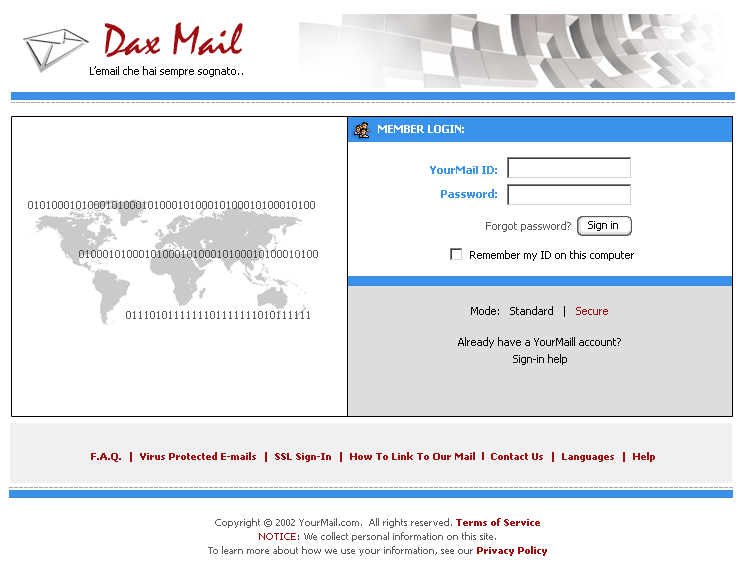
<style>
.page{position:relative;width:752px;height:578px;background:#ffffff}
.page>*{position:absolute;margin:0}
.t1{font:46px "Mistral";color:#9e0c0f}
.t2{font:11px "Tahoma";color:#000000}
.t3{font:11px "Tahoma-Bold";color:#ffffff;text-transform:uppercase}
.t4{font:11px/24px "Tahoma-Bold";color:#3992eb}
.t5{font:11px "Tahoma";color:#595959}
.t6{font:11px "Tahoma";color:#9e0c0f}
.t7{font:10px "Tahoma-Bold";color:#9e0c0f}
.t8{font:10px/14px "Tahoma";color:#595959}
.t9{font:10px/14px "Tahoma-Bold";color:#9e0c0f}
.t10{font:10px/14px "Tahoma";color:#9e0c0f}
</style>
<div class="page">
<p class="t1" style="left:104px;top:22px;width:139px;height:35px">Dax Mail</p>
<p class="t2" style="left:90px;top:66px;width:153px;height:11px">L’email che hai sempre sognato..</p>
<p class="t3" style="left:378px;top:125px;width:86px;height:8px">Member LOgin:</p>
<p class="t4" style="left:430px;top:166px;width:67px;height:32px;text-align:right">YourMail ID:<br>Password:</p>
<p class="t5" style="left:28px;top:201px;width:287px;height:8px">010100010100010100010100010100010100010100010100</p>
<p class="t5" style="left:486px;top:221px;width:85px;height:11px">Forgot password?</p>
<p class="t2" style="left:588px;top:221px;width:30px;height:10px">Sign in</p>
<p class="t5" style="left:79px;top:250px;width:239px;height:8px">0100010100010100010100010100010100010100</p>
<p class="t2" style="left:470px;top:250px;width:164px;height:11px">Remember my ID on this computer</p>
<p class="t5" style="left:126px;top:311px;width:184px;height:8px">0111010111111101111111010111111</p>
<p class="t2" style="left:471px;top:306px;width:137px;height:11px">Mode:   Standard   |   <span class="t6">Secure</span></p>
<p class="t2" style="left:458px;top:337px;width:163px;height:11px">Already have a YourMaill account?</p>
<p class="t2" style="left:513px;top:354px;width:54px;height:11px">Sign-in help</p>
<p class="t7" style="left:91px;top:452px;width:564px;height:10px">F.A.Q.  |  Virus Protected E-mails  |  SSL Sign-In  |  How To Link To Our Mail  l  Contact Us  |  Languages  |  Help</p>
<p class="t8" style="left:208px;top:518px;width:339px;height:38px;text-align:center">Copyright © 2002 YourMail.com.  All rights reserved. <span class="t9">Terms of Service<br></span><span class="t10">NOTICE:</span> We collect personal information on this site.<br>To learn more about how we use your information, see our <span class="t9">Privacy Policy</span></p>
</div>
